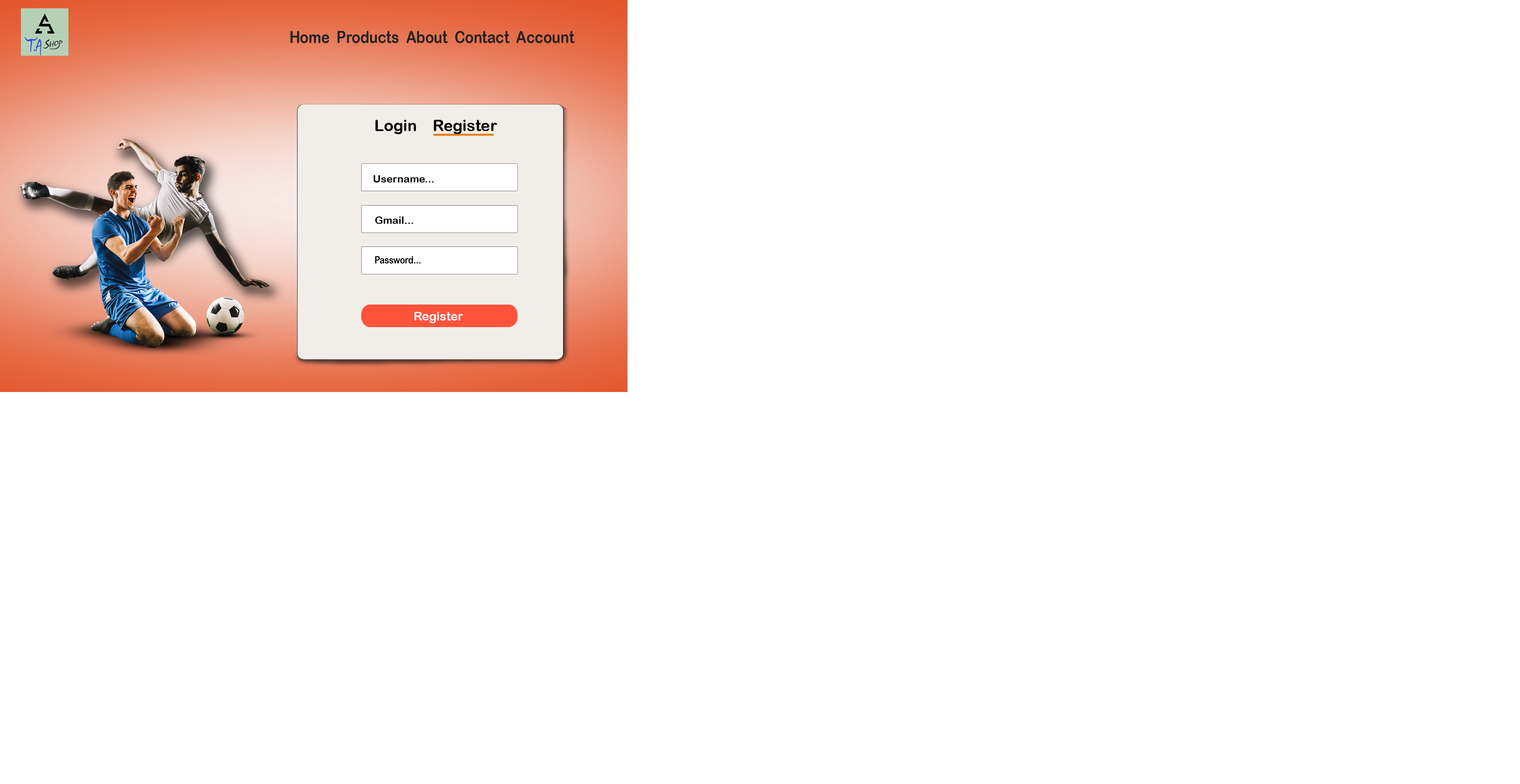
<style>
.page{position:relative;width:1520px;height:784px;background:#ffffff}
.page>*{position:absolute;margin:0}
.t1{font:17px "ArialRoundedMTBold";color:#232222;scale:0.83 1}
.t2{font:15.7px "ArialRoundedMTBold";color:#000000}
.t3{font:10.5px "ArialRoundedMTBold";color:#000000}
.t4{font:10.5px "ArialRoundedMTBold";color:#000000;scale:0.79 1}
.t5{font:12.1px "ArialRoundedMTBold";color:#ffffff}
</style>
<div class="page">
<p class="t1" style="left:290px;top:31px;width:285px;height:12px">Home  Products  About  Contact  Account</p>
<p class="t2" style="left:375px;top:120px;width:122px;height:14px">Login    Register</p>
<p class="t3" style="left:373px;top:175px;width:61px;height:8px">Username...</p>
<p class="t3" style="left:375px;top:217px;width:38px;height:7px">Gmail...</p>
<p class="t4" style="left:375px;top:256px;width:46px;height:8px">Password...</p>
<p class="t5" style="left:414px;top:312px;width:49px;height:11px">Register</p>
</div>
